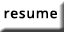
<style>
.page{position:relative;width:64px;height:32px;background:#ffffff}
.page>*{position:absolute;margin:0}
.t1{font:14px "OpenSans-Semibold";letter-spacing:0.04em;color:#000000}
</style>
<div class="page">
<p class="t1" style="left:4px;top:10px;width:53px;height:9px">resume</p>
</div>
